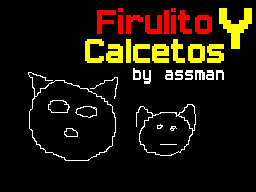
<style>
.page{position:relative;width:256px;height:192px;background:#000000}
.page>*{position:absolute;margin:0}
.t1{font:48px/29px "SmallPixel-7";color:#ff0000}
.t2{font:48px/29px "SmallPixel-7";color:#ffff00}
.t3{font:82px "SmallPixel-7";color:#ffff00}
.t4{font:24px "SmallPixel-7";color:#ffffff}
</style>
<div class="page">
<p class="t1" style="left:85px;top:8px;width:139px;height:55px;text-align:center">Firulito<br><span class="t2">Calcetos</span></p>
<p class="t3" style="left:219px;top:8px;width:33px;height:41px">Y</p>
<p class="t4" style="left:133px;top:68px;width:91px;height:16px">by assman</p>
</div>
